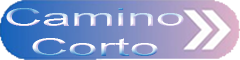
<style>
.page{position:relative;width:240px;height:60px}
.page>*{position:absolute;margin:0}
.t1{font:25.2px "ArialMT";scale:2.09 1}
</style>
<div class="page">
<p class="t1" style="left:6px;top:8px;width:178px;height:48px;text-align:center">Camino<br>Corto</p>
</div>
